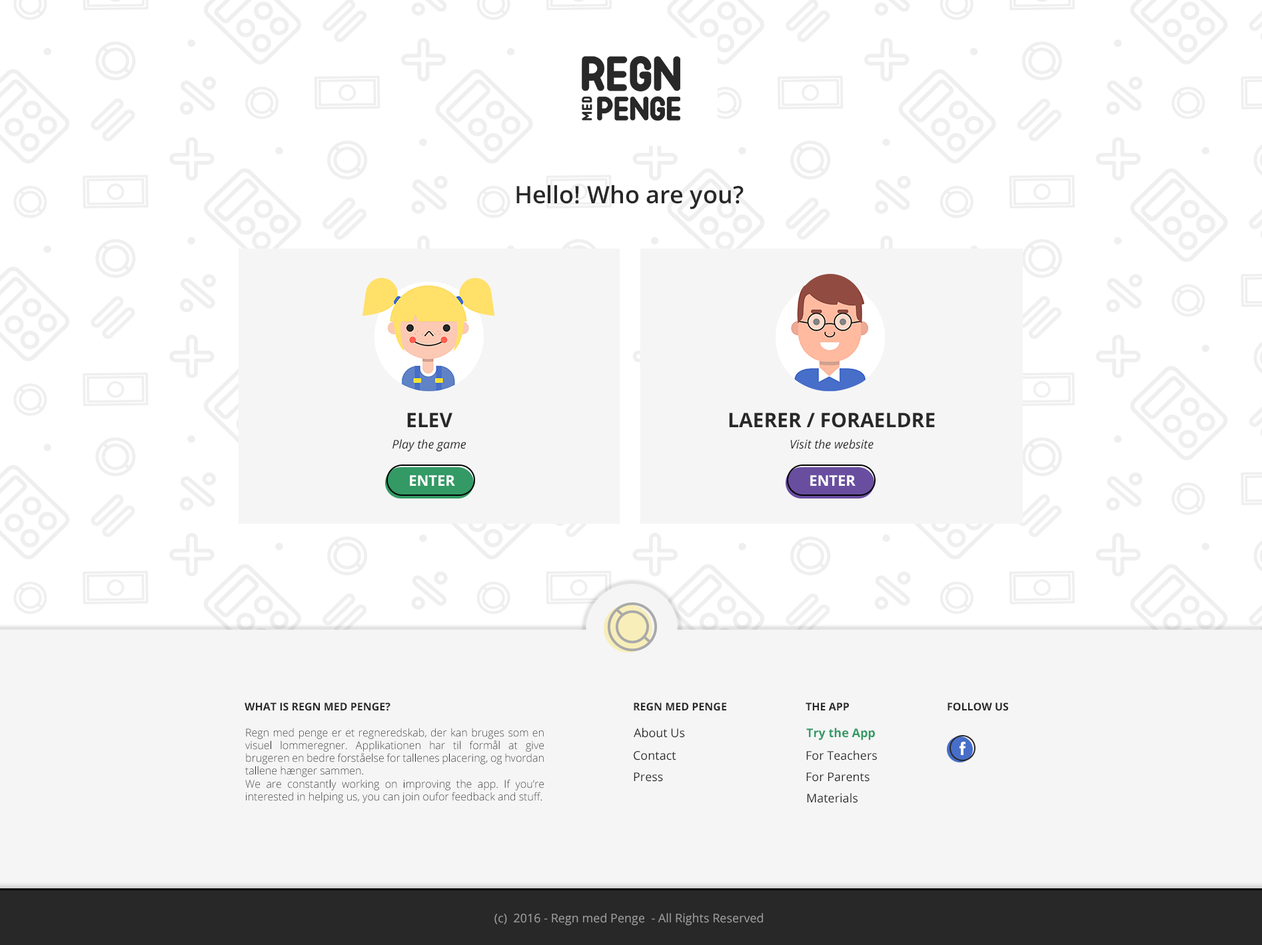
<style>
.page{position:relative;width:1262px;height:945px;background:#ffffff}
.page>*{position:absolute;margin:0}
.t1{font:24px "OpenSans-Semibold";color:#282828}
.t2{font:20px "OpenSans-Bold";color:#282828}
.t3{font:12px "OpenSans-Italic";color:#282828}
.t4{font:14.7px "OpenSans-Bold";color:#ffffff}
.t5{font:10.7px "OpenSans-Bold";color:#282828}
.t6{font:10.7px "OpenSans-Light";color:#282828}
.t7{font:12px "OpenSans";color:#282828}
.t8{font:12px "OpenSans-Bold";color:#339a65}
.t9{font:12px "OpenSans";color:#9e9e9e}
</style>
<div class="page">
<p class="t1" style="left:516px;top:185px;width:228px;height:24px">Hello! Who are you?</p>
<p class="t2" style="left:407px;top:412px;width:45px;height:15px">ELEV</p>
<p class="t2" style="left:729px;top:412px;width:206px;height:16px">LAERER / FORAELDRE</p>
<p class="t3" style="left:392px;top:439px;width:74px;height:13px">Play the game</p>
<p class="t3" style="left:790px;top:439px;width:84px;height:10px">Visit the website</p>
<p class="t4" style="left:410px;top:475px;width:45px;height:11px">ENTER</p>
<p class="t4" style="left:810px;top:475px;width:46px;height:11px">ENTER</p>
<p class="t5" style="left:245px;top:702px;width:145px;height:9px">WHAT IS REGN MED PENGE?</p>
<p class="t5" style="left:634px;top:702px;width:92px;height:9px">REGN MED PENGE</p>
<p class="t5" style="left:806px;top:702px;width:43px;height:8px">THE APP</p>
<p class="t5" style="left:948px;top:702px;width:60px;height:9px">FOLLOW US</p>
<p class="t6" style="left:245px;top:728px;width:299px;height:75px;text-align:justify">Regn med penge er et regneredskab, der kan bruges som en visuel lommeregner. Applikationen har til formål at give brugeren en bedre forståelse for tallenes placering, og hvordan tallene hænger sammen.<br>We are constantly working on improving the app. If you’re interested in helping us, you can join oufor feedback and stuff.</p>
<p class="t7" style="left:634px;top:728px;width:51px;height:10px">About Us</p>
<p class="t8" style="left:806px;top:728px;width:69px;height:12px">Try the App</p>
<p class="t7" style="left:634px;top:751px;width:42px;height:9px">Contact</p>
<p class="t7" style="left:806px;top:750px;width:71px;height:10px">For Teachers</p>
<p class="t7" style="left:634px;top:772px;width:29px;height:10px">Press</p>
<p class="t7" style="left:806px;top:772px;width:64px;height:10px">For Parents</p>
<p class="t7" style="left:807px;top:793px;width:51px;height:10px">Materials</p>
<p class="t9" style="left:494px;top:913px;width:269px;height:13px">(c)  2016 - Regn med Penge  - All Rights Reserved</p>
</div>
